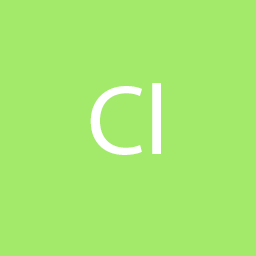
<style>
.page{position:relative;width:256px;height:256px;background:#a3ea6a}
.page>*{position:absolute;margin:0}
.t1{font:100px "MyriadPro-Regular";color:#ffffff}
</style>
<div class="page">
<p class="t1" style="left:90px;top:83px;width:71px;height:72px">Cl</p>
</div>
